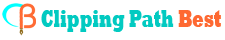
<style>
.page{position:relative;width:225px;height:40px;background:#ffffff}
.page>*{position:absolute;margin:0}
.t1{font:24.9px "Rockwell-ExtraBold";color:#02cac1;scale:0.65 1}
.t2{font:25.2px "Rockwell-ExtraBold";color:#fe6932;scale:0.65 1}
</style>
<div class="page">
<p class="t1" style="left:41px;top:10px;width:133px;height:22px">Clipping Path</p>
<p class="t2" style="left:178px;top:10px;width:43px;height:17px">Best</p>
</div>
